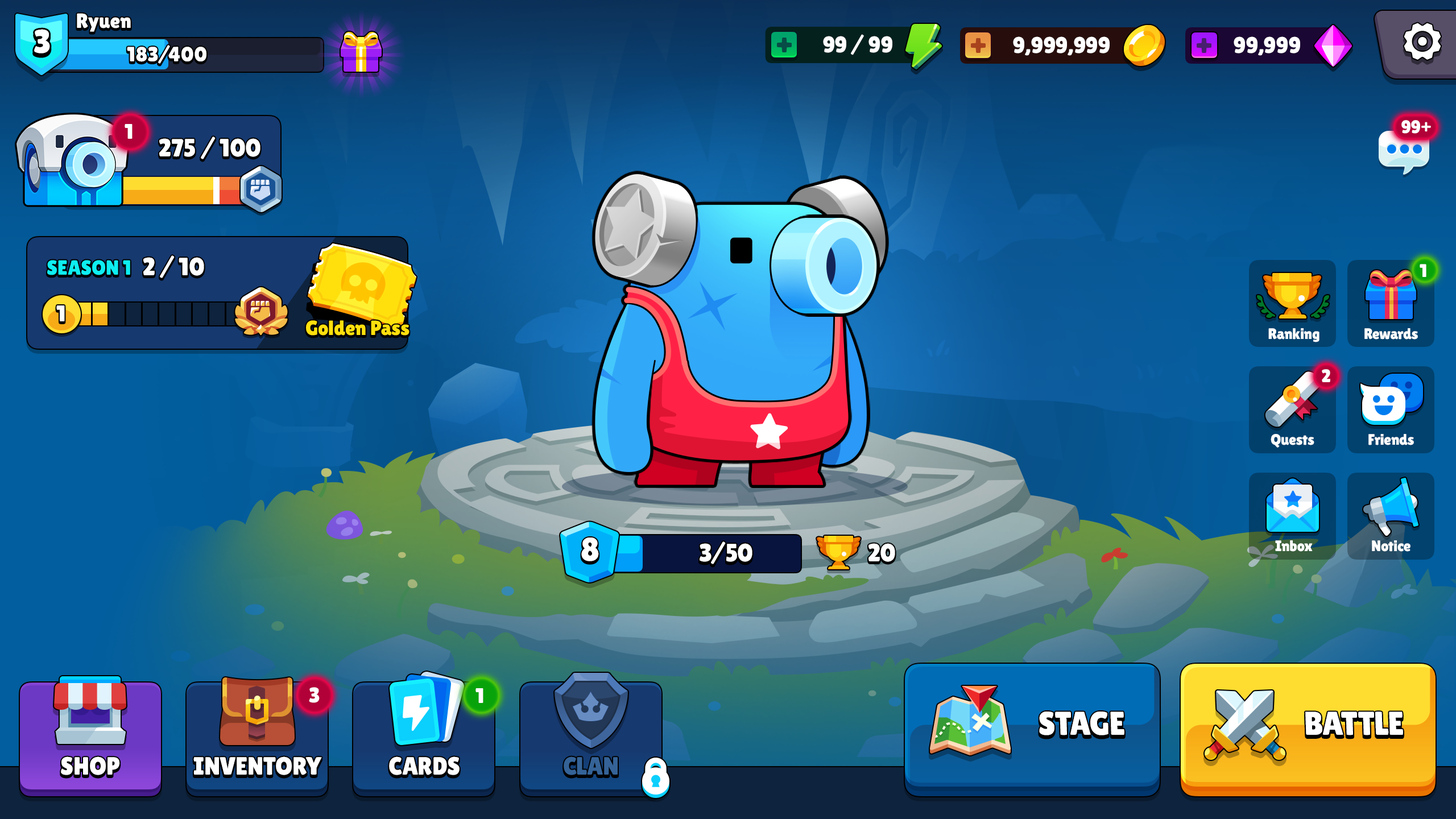
<style>
.page{position:relative;width:1456px;height:819px}
.page>*{position:absolute;margin:0}
.t1{font:20.5px "LilitaOne";color:#ffffff}
.t2{font:33px "LilitaOne";color:#ffffff}
.t3{font:22.7px "LilitaOne";letter-spacing:-0.01em;color:#ffffff;text-transform:uppercase}
.t4{font:20.5px "LilitaOne";letter-spacing:0.02em;color:#ffffff}
.t5{font:21.2px "LilitaOne";color:#ffffff;text-transform:uppercase}
.t6{font:18.2px "LilitaOne";color:#ffffff;text-transform:uppercase}
.t7{font:25px "LilitaOne";color:#ffffff;text-transform:uppercase}
.t8{font:20.5px "LilitaOne";color:#0eeef1;text-transform:uppercase}
.t9{font:22.7px "LilitaOne";color:#ffffff;text-transform:uppercase}
.t10{font:20.5px "LilitaOne";color:#ffe00d}
.t11{font:15.2px "LilitaOne";color:#ffffff}
.t12{font:33px "LilitaOne";color:#ffffff;text-transform:uppercase}
.t13{font:25px "LilitaOne";color:#356397;text-transform:uppercase}
</style>
<div class="page">
<p class="t1" style="left:77px;top:13px;width:54px;height:19px">Ryuen</p>
<p class="t2" style="left:34px;top:29px;width:16px;height:24px">3</p>
<p class="t3" style="left:823px;top:34px;width:69px;height:21px">99 / 99</p>
<p class="t3" style="left:1013px;top:36px;width:97px;height:20px">9,999,999</p>
<p class="t3" style="left:1234px;top:36px;width:66px;height:20px">99,999</p>
<p class="t4" style="left:127px;top:45px;width:79px;height:19px">183/400</p>
<p class="t5" style="left:125px;top:124px;width:8px;height:15px">1</p>
<p class="t6" style="left:1401px;top:120px;width:30px;height:14px">99+</p>
<p class="t7" style="left:159px;top:136px;width:101px;height:23px">275 / 100</p>
<p class="t7" style="left:143px;top:255px;width:61px;height:23px">2 / 10</p>
<p class="t8" style="left:47px;top:260px;width:83px;height:15px">Season 1</p>
<p class="t6" style="left:1420px;top:264px;width:6px;height:13px">1</p>
<p class="t9" style="left:56px;top:305px;width:9px;height:16px">1</p>
<p class="t10" style="left:306px;top:320px;width:103px;height:16px">Golden Pass</p>
<p class="t11" style="left:1268px;top:328px;width:51px;height:14px">Ranking</p>
<p class="t11" style="left:1364px;top:328px;width:54px;height:12px">Rewards</p>
<p class="t6" style="left:1322px;top:369px;width:8px;height:13px">2</p>
<p class="t11" style="left:1271px;top:434px;width:43px;height:14px">Quests</p>
<p class="t11" style="left:1368px;top:434px;width:46px;height:11px">Friends</p>
<p class="t12" style="left:581px;top:537px;width:18px;height:24px">8</p>
<p class="t7" style="left:700px;top:541px;width:52px;height:23px">3/50</p>
<p class="t7" style="left:868px;top:543px;width:27px;height:19px">20</p>
<p class="t11" style="left:1275px;top:540px;width:38px;height:12px">Inbox</p>
<p class="t11" style="left:1372px;top:540px;width:38px;height:12px">Notice</p>
<p class="t5" style="left:309px;top:687px;width:11px;height:16px">3</p>
<p class="t5" style="left:475px;top:688px;width:8px;height:15px">1</p>
<p class="t12" style="left:1039px;top:711px;width:85px;height:24px">Stage</p>
<p class="t12" style="left:1305px;top:711px;width:98px;height:24px">Battle</p>
<p class="t7" style="left:61px;top:756px;width:59px;height:19px">Shop</p>
<p class="t7" style="left:193px;top:756px;width:129px;height:19px">Inventory</p>
<p class="t7" style="left:389px;top:756px;width:71px;height:19px">Cards</p>
<p class="t13" style="left:564px;top:756px;width:54px;height:19px">clan</p>
</div>
